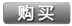
<style>
.page{position:relative;width:72px;height:26px;background:#ffffff}
.page>*{position:absolute;margin:0}
.t1{font:16px "MicrosoftYaHei";letter-spacing:-0.05em;color:#ffffff;font-weight:bold}
</style>
<div class="page">
<p class="t1" style="left:17px;top:5px;width:37px;height:16px">购 买</p>
</div>
